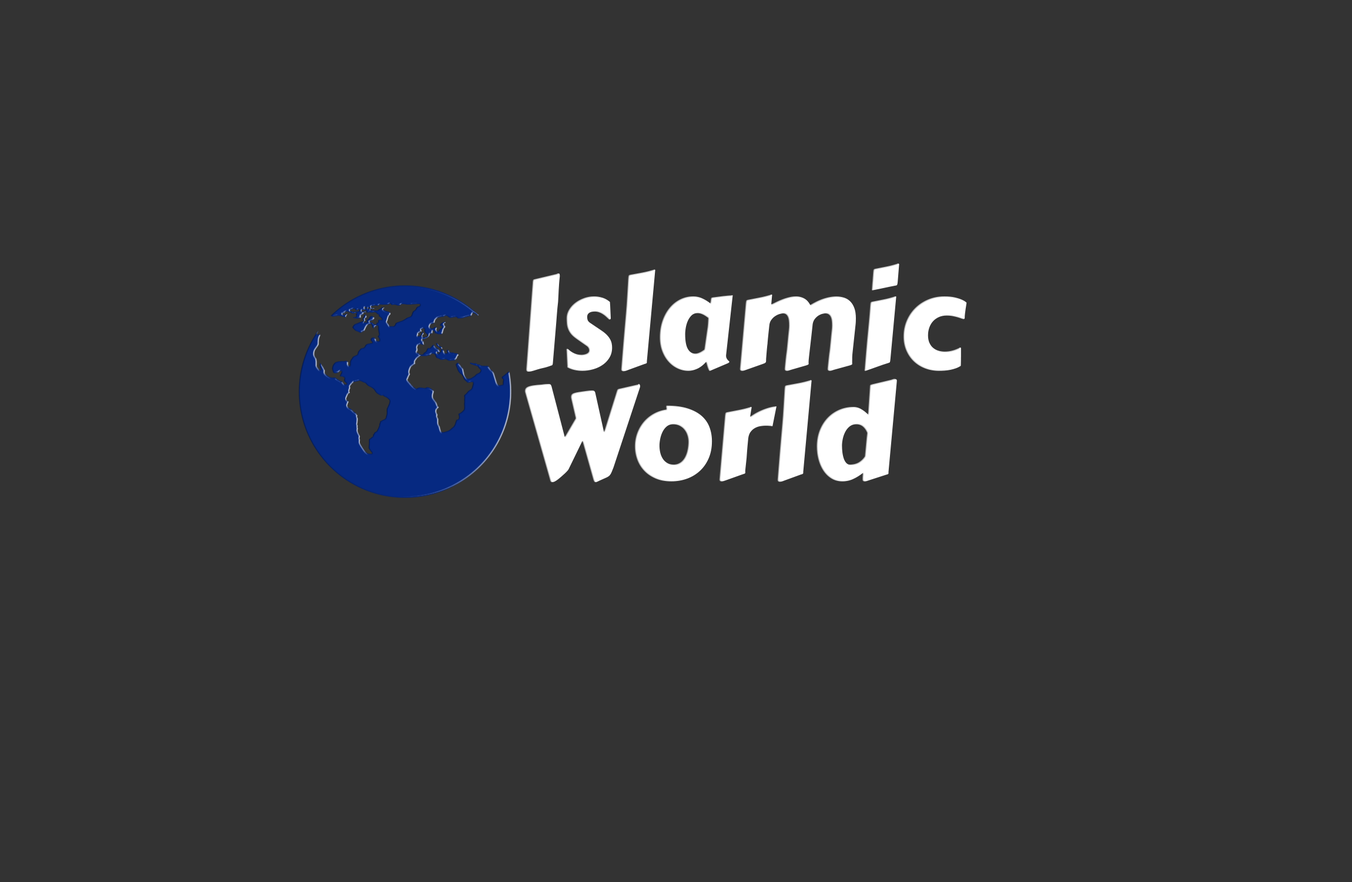
<style>
.page{position:relative;width:1352px;height:882px;background:#333333}
.page>*{position:absolute;margin:0}
.t1{font:130.8px/110.2px "CarterOne";color:#ffffff}
</style>
<div class="page">
<p class="t1" style="left:524px;top:263px;width:443px;height:219px">Islamic<br>World</p>
</div>
